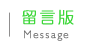
<style>
.page{position:relative;width:90px;height:50px;background:#ffffff}
.page>*{position:absolute;margin:0}
.t1{font:16px "DFYuan-Lt-HK-BF";letter-spacing:0.12em;color:#3ed73a;font-weight:bold}
.t2{font:11px "Humanist521BT-Light";letter-spacing:0.12em;color:#707070;font-weight:bold}
</style>
<div class="page">
<p class="t1" style="left:22px;top:9px;width:52px;height:16px">留言版</p>
<p class="t2" style="left:24px;top:30px;width:45px;height:11px">Message</p>
</div>
